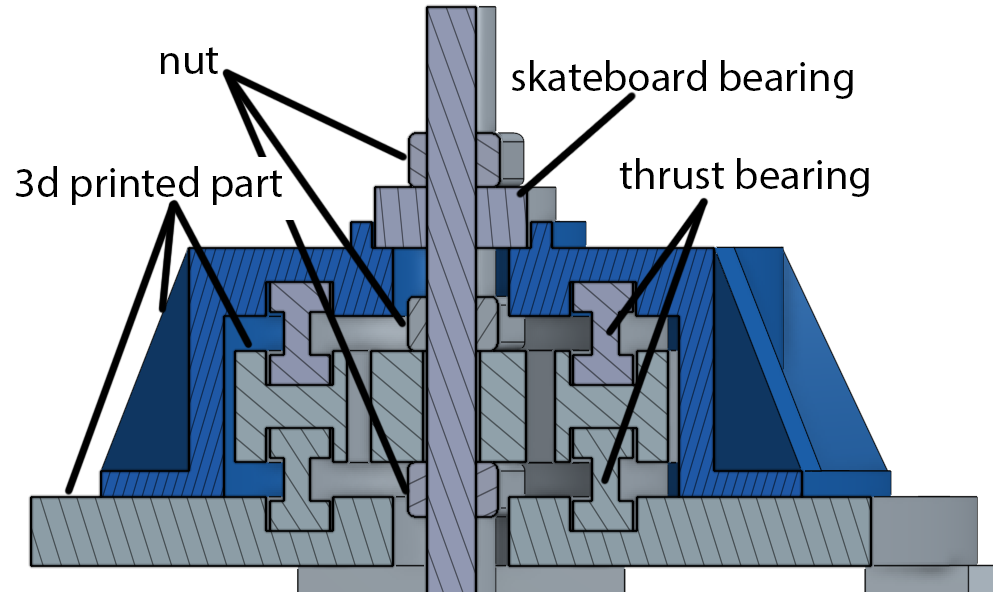
<style>
.page{position:relative;width:993px;height:592px;background:#ffffff}
.page>*{position:absolute;margin:0}
.t1{font:42.7px "MyriadPro-Regular";color:#000000}
</style>
<div class="page">
<p class="t1" style="left:160px;top:47px;width:58px;height:27px">nut</p>
<p class="t1" style="left:512px;top:60px;width:341px;height:39px">skateboard bearing</p>
<p class="t1" style="left:619px;top:158px;width:250px;height:39px">thrust bearing</p>
<p class="t1" style="left:15px;top:166px;width:267px;height:39px">3d printed part</p>
</div>
